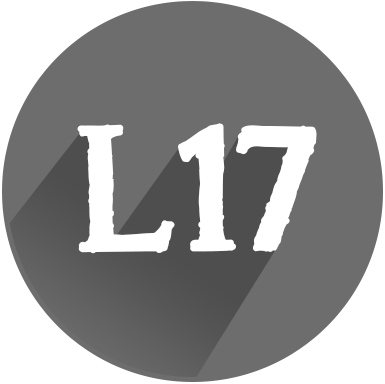
<style>
.page{position:relative;width:385px;height:384px;background:#6d6d6d}
.page>*{position:absolute;margin:0}
.t1{font:170px "asongforjennifer";color:#ffffff;font-weight:bold}
</style>
<div class="page">
<p class="t1" style="left:77px;top:123px;width:240px;height:131px">L17</p>
</div>
